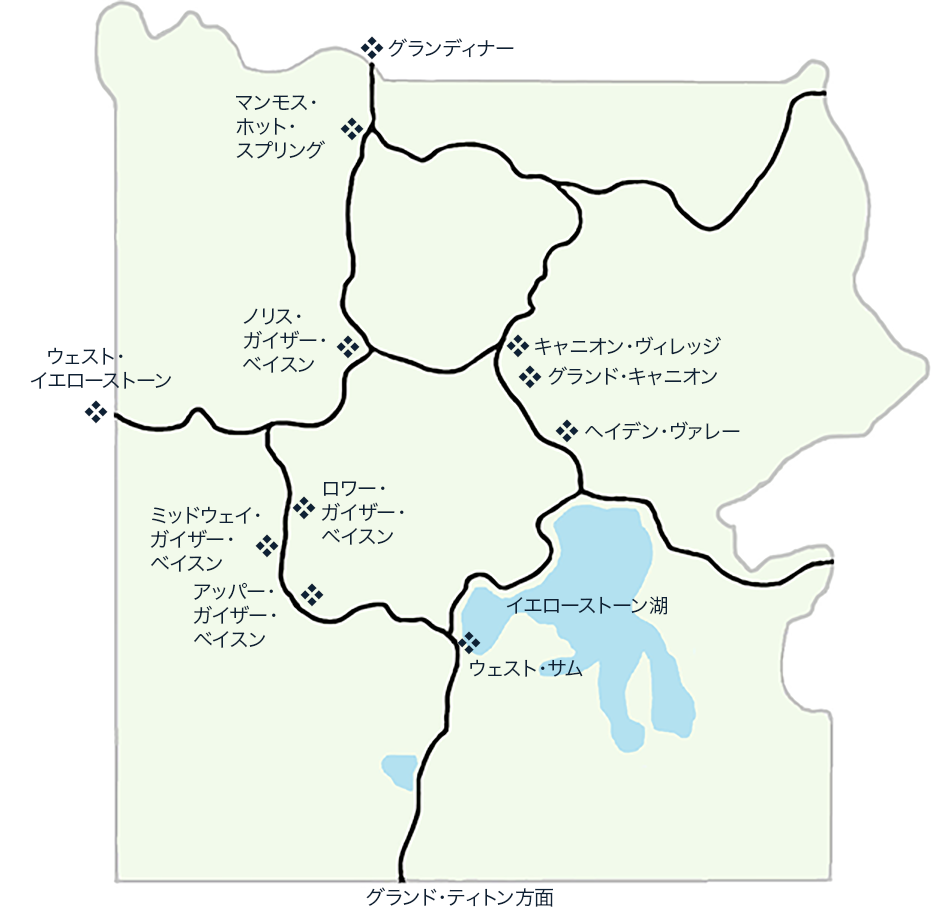
<style>
.page{position:relative;width:945px;height:924px;background:#f2faeb}
.page>*{position:absolute;margin:0}
.t1{font:24px "HiraKakuProN-W3";color:#0e2135}
.t2{font:20px "HiraKakuProN-W3";color:#0e2135}
.t3{font:12px "HiraKakuProN-W3";color:#0e2135}
</style>
<div class="page">
<p class="t1" style="left:360px;top:36px;width:24px;height:24px">◆</p>
<p class="t2" style="left:388px;top:38px;width:126px;height:20px">グランディナー</p>
<p class="t2" style="left:236px;top:95px;width:89px;height:64px">マンモス・<br>ホット・<br>スプリング</p>
<p class="t1" style="left:340px;top:117px;width:24px;height:24px">◆</p>
<p class="t2" style="left:243px;top:308px;width:82px;height:65px">ノリス・<br>ガイザー・<br>ベイスン</p>
<p class="t1" style="left:336px;top:335px;width:24px;height:24px">◆</p>
<p class="t1" style="left:506px;top:334px;width:24px;height:24px">◆</p>
<p class="t2" style="left:535px;top:336px;width:186px;height:20px">キャニオン・ヴィレッジ</p>
<p class="t2" style="left:30px;top:347px;width:141px;height:42px"><span class="t3">　</span>ウェスト・<br>イエローストーン</p>
<p class="t1" style="left:518px;top:365px;width:24px;height:24px">◆</p>
<p class="t2" style="left:548px;top:366px;width:169px;height:20px">グランド・キャニオン</p>
<p class="t1" style="left:84px;top:400px;width:24px;height:24px">◆</p>
<p class="t1" style="left:555px;top:419px;width:24px;height:24px">◆</p>
<p class="t2" style="left:585px;top:421px;width:155px;height:19px">ヘイデン・ヴァレー</p>
<p class="t2" style="left:321px;top:481px;width:83px;height:64px">ロワー・<br>ガイザー・<br>ベイスン</p>
<p class="t1" style="left:292px;top:496px;width:24px;height:24px">◆</p>
<p class="t2" style="left:150px;top:506px;width:110px;height:66px">ミッドウェイ・<br>ガイザー・<br>ベイスン</p>
<p class="t1" style="left:255px;top:534px;width:24px;height:24px">◆</p>
<p class="t2" style="left:193px;top:582px;width:83px;height:66px">アッパー・<br>ガイザー・<br>ベイスン</p>
<p class="t1" style="left:300px;top:583px;width:24px;height:24px">◆</p>
<p class="t2" style="left:506px;top:596px;width:161px;height:19px">イエローストーン湖</p>
<p class="t1" style="left:457px;top:631px;width:24px;height:24px">◆</p>
<p class="t2" style="left:470px;top:659px;width:113px;height:18px">ウェスト・サム</p>
<p class="t2" style="left:366px;top:887px;width:187px;height:20px">グランド・ティトン方面</p>
</div>
